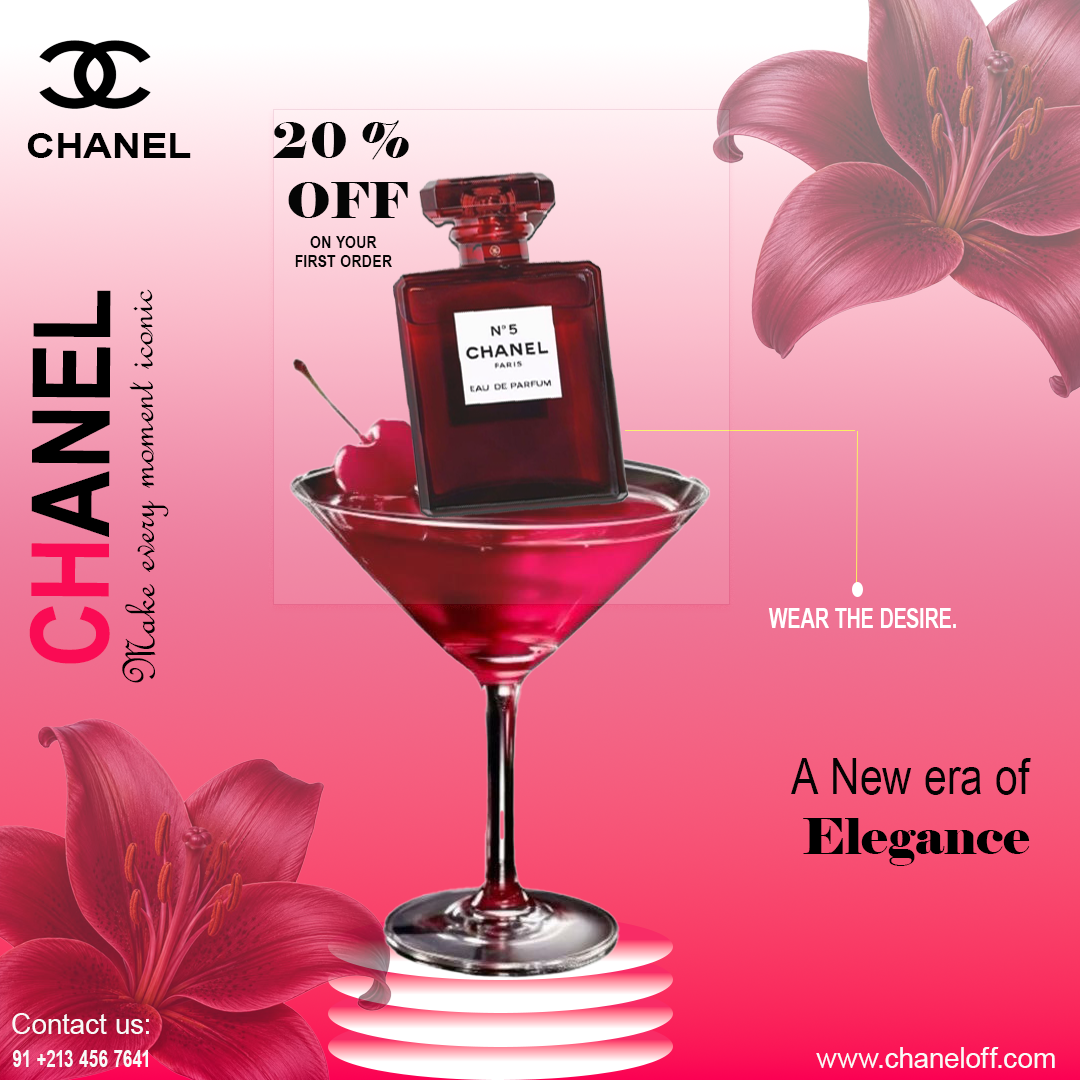
<style>
.page{position:relative;width:1080px;height:1080px}
.page>*{position:absolute;margin:0}
.t1{font:50px "Elephant-Regular";letter-spacing:0.01em;color:#050505}
.t2{font:35.3px "Arial-BoldMT";letter-spacing:0.01em;color:#000000;scale:1.13 1}
.t3{font:16px "Arial-BoldMT";letter-spacing:0.01em;color:#050505;scale:0.9 1}
.t4{font:107.7px "Arial-BoldMT";letter-spacing:0.01em;color:#000000;scale:0.85 1}
.t5{font:107.7px "Arial-BoldMT";letter-spacing:0.01em;color:#fa0b54;scale:0.85 1}
.t6{font:50px "FrenchScriptMT";letter-spacing:0.01em;color:#000000}
.t7{font:27.5px "Arial-BoldMT";letter-spacing:0.01em;color:#ffffff;scale:0.71 1}
.t8{font:50px "ArialNarrow";letter-spacing:0.01em;color:#030303}
.t9{font:50px "Elephant-Regular";letter-spacing:0.01em;color:#000000}
.t10{font:28.7px "ArialMT";letter-spacing:0.01em;color:#f9f9f9}
.t11{font:23.4px "Arial-BoldMT";letter-spacing:0.01em;color:#f9f9f9;scale:0.74 1}
</style>
<div class="page">
<p class="t1" style="left:273px;top:120px;width:136px;height:98px;text-align:center">20 % <br>OFF</p>
<p class="t2" style="left:27px;top:133px;width:164px;height:25px">CHANEL</p>
<p class="t3" style="left:295px;top:236px;width:97px;height:31px;text-align:center">ON YOUR<br>FIRST ORDER</p>
<p class="t4" style="left:29px;top:290px;width:82px;height:374px;rotate:-90deg"><span class="t5">CH</span>ANEL</p>
<p class="t6" style="left:122px;top:289px;width:47px;height:394px;rotate:-90deg">Make every moment iconic</p>
<p class="t7" style="left:768px;top:608px;width:188px;height:20px">WEAR THE DESIRE.</p>
<p class="t8" style="left:791px;top:758px;width:240px;height:108px;text-align:center">A New era of <br><span class="t9">Elegance</span></p>
<p class="t10" style="left:12px;top:1013px;width:137px;height:21px">Contact us:</p>
<p class="t10" style="left:816px;top:1047px;width:239px;height:21px">www.chaneloff.com</p>
<p class="t11" style="left:13px;top:1050px;width:135px;height:17px">91 +213 456 7641</p>
</div>
